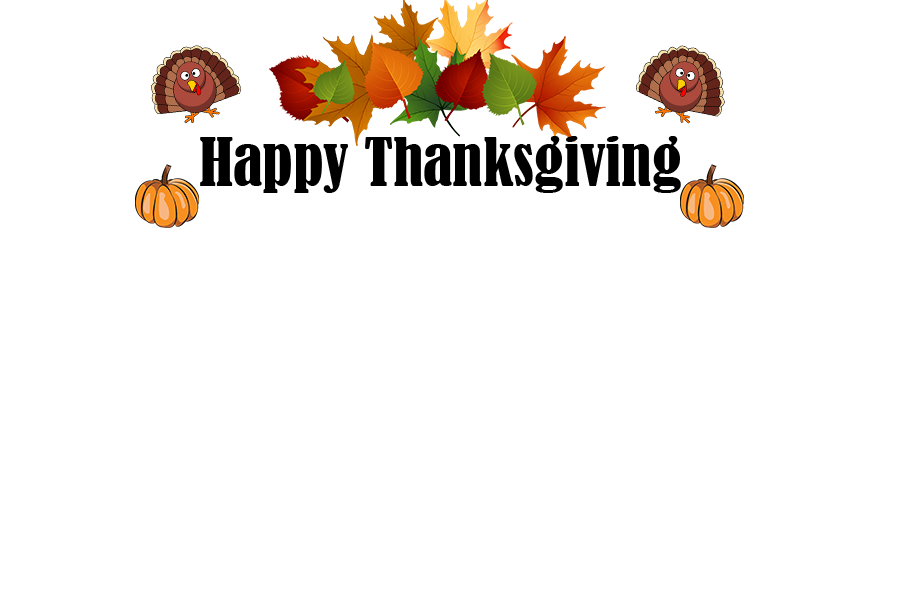
<style>
.page{position:relative;width:900px;height:600px;background:#ffffff}
.page>*{position:absolute;margin:0}
.t1{font:61.7px "BernardMT-Condensed";color:#000000}
</style>
<div class="page">
<p class="t1" style="left:200px;top:136px;width:481px;height:57px">Happy Thanksgiving</p>
</div>
